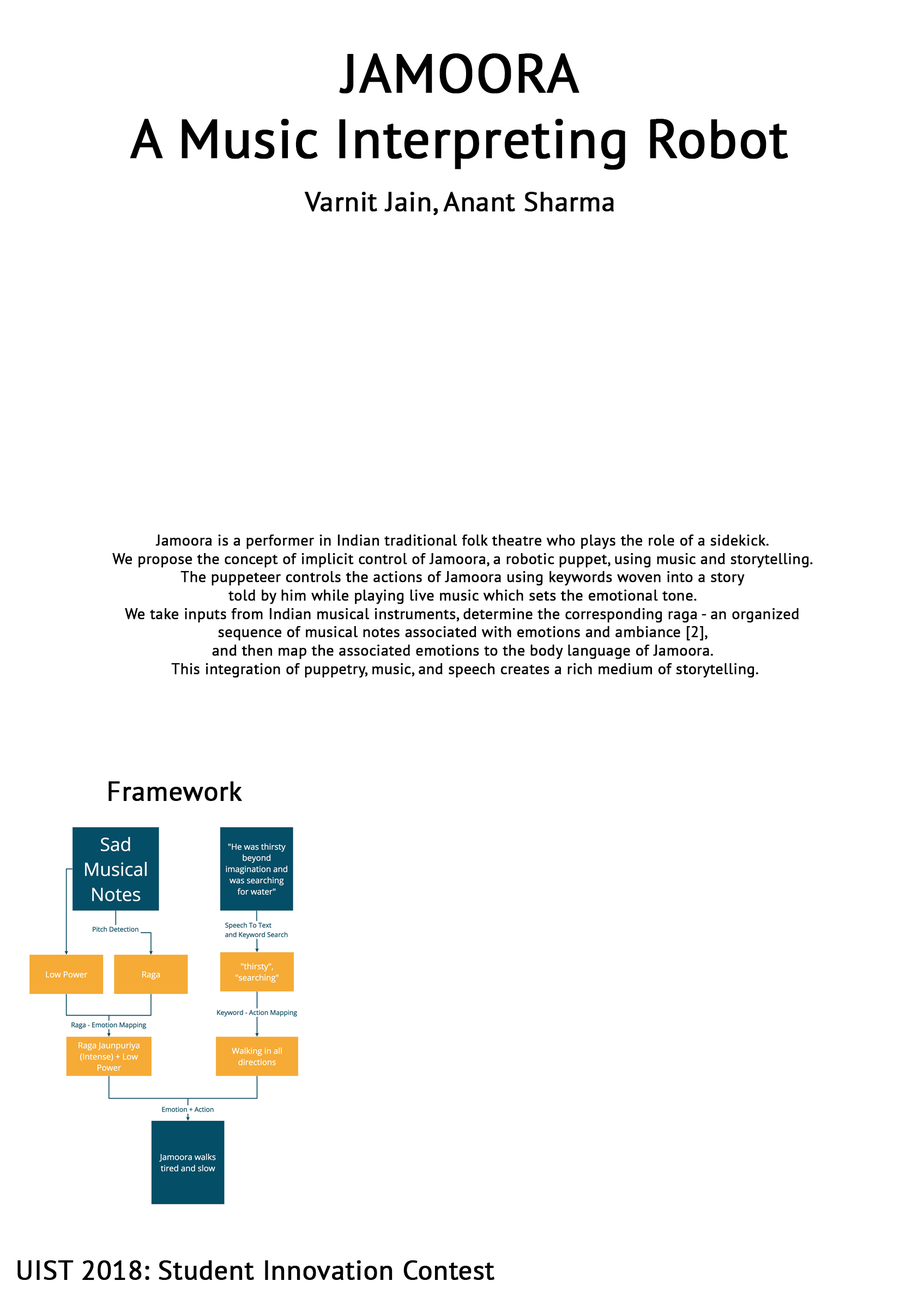
<style>
.page{position:relative;width:918px;height:1299px;background:#ffffff}
.page>*{position:absolute;margin:0}
.t1{font:54.5px "PTSans-Regular";color:#000000;font-weight:bold}
.t2{font:27.2px "PTSans-Regular";color:#000000;font-weight:bold}
.t3{font:15.3px "PTSans-Regular";color:#000000;font-weight:bold}
</style>
<div class="page">
<p class="t1" style="left:130px;top:53px;width:658px;height:117px;text-align:center">JAMOORA<br>A Music Interpreting Robot</p>
<p class="t2" style="left:304px;top:192px;width:310px;height:23px">Varnit Jain, Anant Sharma</p>
<p class="t3" style="left:112px;top:535px;width:701px;height:143px;text-align:center">Jamoora is a performer in Indian traditional folk theatre who plays the role of a sidekick. <br>We propose the concept of implicit control of Jamoora, a robotic puppet, using music and storytelling. <br>The puppeteer controls the actions of Jamoora using keywords woven into a story <br>told by him while playing live music which sets the emotional tone. <br>We take inputs from Indian musical instruments, determine the corresponding raga - an organized <br>sequence of musical notes associated with emotions and ambiance [2], <br>and then map the associated emotions to the body language of Jamoora. <br>This integration of puppetry, music, and speech creates a rich medium of storytelling.</p>
<p class="t2" style="left:108px;top:782px;width:134px;height:19px">Framework</p>
<p class="t2" style="left:17px;top:1261px;width:477px;height:19px">UIST 2018: Student Innovation Contest</p>
</div>
